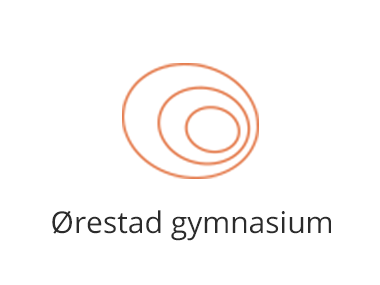
<style>
.page{position:relative;width:380px;height:285px;background:#ffffff}
.page>*{position:absolute;margin:0}
.t1{font:30px "OpenSans";color:#2b2b2b}
</style>
<div class="page">
<p class="t1" style="left:52px;top:210px;width:279px;height:31px">Ørestad gymnasium</p>
</div>
